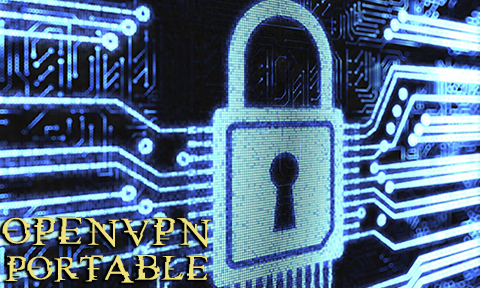
<style>
.page{position:relative;width:480px;height:288px}
.page>*{position:absolute;margin:0}
.t1{font:32.4px/36px "MATRIX";color:#eee27a;scale:1.11 1}
.t2{font:36px/36px "MATRIX";color:#eee27a;scale:1.11 1}
</style>
<div class="page">
<p class="t1" style="left:2px;top:217px;width:210px;height:66px;text-align:center"><span class="t2">OPENVPN<br></span>PORTABLE</p>
</div>
